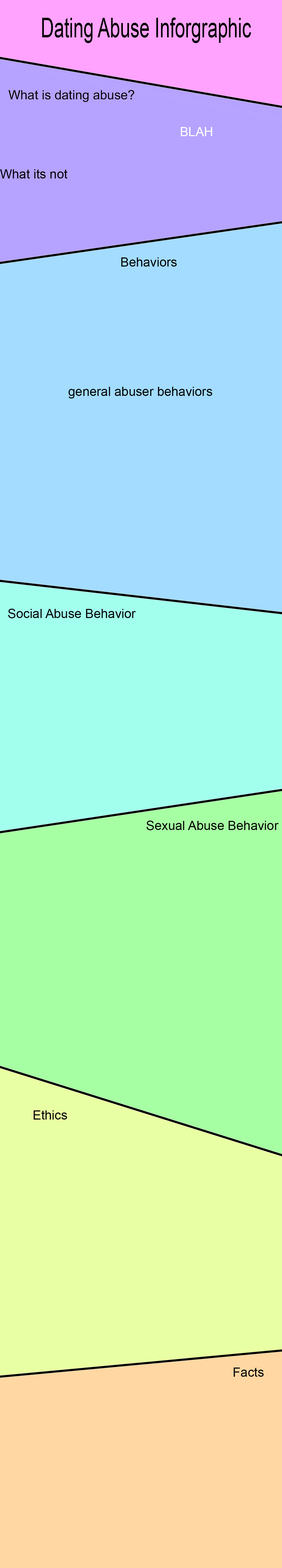
<style>
.page{position:relative;width:282px;height:1568px;background:#a3dcff}
.page>*{position:absolute;margin:0}
.t1{font:27.4px "ArialMT";color:#000000;scale:0.67 1}
.t2{font:12.8px "ArialMT";color:#000000}
.t3{font:12.8px "ArialMT";color:#ffffff}
</style>
<div class="page">
<p class="t1" style="left:42px;top:18px;width:209px;height:25px">Dating Abuse Inforgraphic</p>
<p class="t2" style="left:8px;top:90px;width:126px;height:12px">What is dating abuse?</p>
<p class="t3" style="left:181px;top:127px;width:31px;height:9px">BLAH</p>
<p class="t2" style="left:0px;top:169px;width:68px;height:9px">What its not</p>
<p class="t2" style="left:121px;top:257px;width:56px;height:10px">Behaviors</p>
<p class="t2" style="left:68px;top:387px;width:144px;height:12px">general abuser behaviors</p>
<p class="t2" style="left:8px;top:609px;width:128px;height:9px">Social Abuse Behavior</p>
<p class="t2" style="left:147px;top:821px;width:132px;height:9px">Sexual Abuse Behavior</p>
<p class="t2" style="left:33px;top:1110px;width:34px;height:10px">Ethics</p>
<p class="t2" style="left:234px;top:1368px;width:30px;height:9px">Facts</p>
</div>
